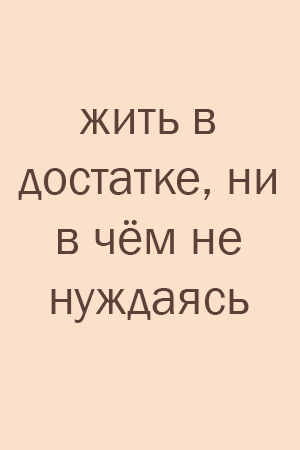
<style>
.page{position:relative;width:300px;height:450px;background:#f9e1ca}
.page>*{position:absolute;margin:0}
.t1{font:50px "FranklinGothic-Book";color:#5d4037}
</style>
<div class="page">
<p class="t1" style="left:18px;top:109px;width:258px;height:214px;text-align:center">жить в достатке, ни в чём не нуждаясь</p>
</div>
